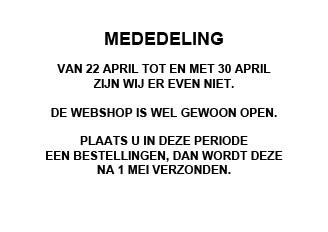
<style>
.page{position:relative;width:328px;height:232px;background:#ffffff}
.page>*{position:absolute;margin:0}
.t1{font:12px "Arial-BoldMT";color:#000000}
.t2{font:12px "MyriadPro-Regular";color:#000000}
.t3{font:18px "Arial-BoldMT";color:#000000}
</style>
<div class="page">
<p class="t1" style="left:46px;top:32px;width:237px;height:142px;text-align:center"><span class="t2"><br><br></span><span class="t3">MEDEDELING<br></span><br>VAN 22 APRIL TOT EN MET 30 APRIL<br>ZIJN WIJ ER EVEN NIET. <br><br>DE WEBSHOP IS WEL GEWOON OPEN.<br><br>PLAATS U IN DEZE PERIODE <br>EEN BESTELLINGEN, DAN WORDT DEZE<br>NA 1 MEI VERZONDEN.</p>
</div>
